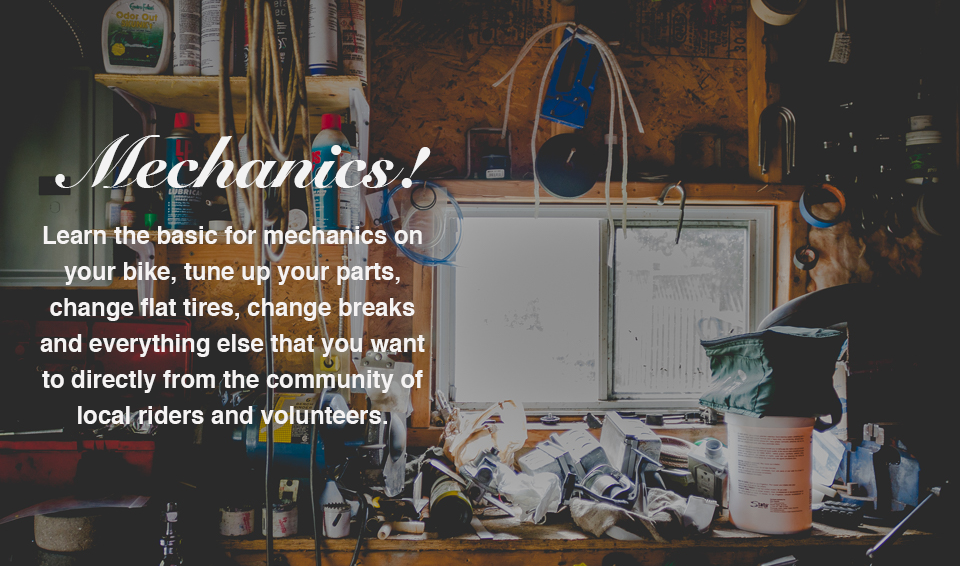
<style>
.page{position:relative;width:960px;height:566px;background:#2a2a2a}
.page>*{position:absolute;margin:0}
.t1{font:72px "SnellRoundhand-Black";color:#f3f3f3}
.t2{font:24px/36px "Helvetica-Bold";color:#f5f3f3}
</style>
<div class="page">
<p class="t1" style="left:55px;top:134px;width:376px;height:54px">Mechanics!</p>
<p class="t2" style="left:40px;top:226px;width:385px;height:198px;text-align:center">Learn the basic for mechanics on your bike, tune up your parts, change flat tires, change breaks and everything else that you want to directly from the community of local riders and volunteers.</p>
</div>
